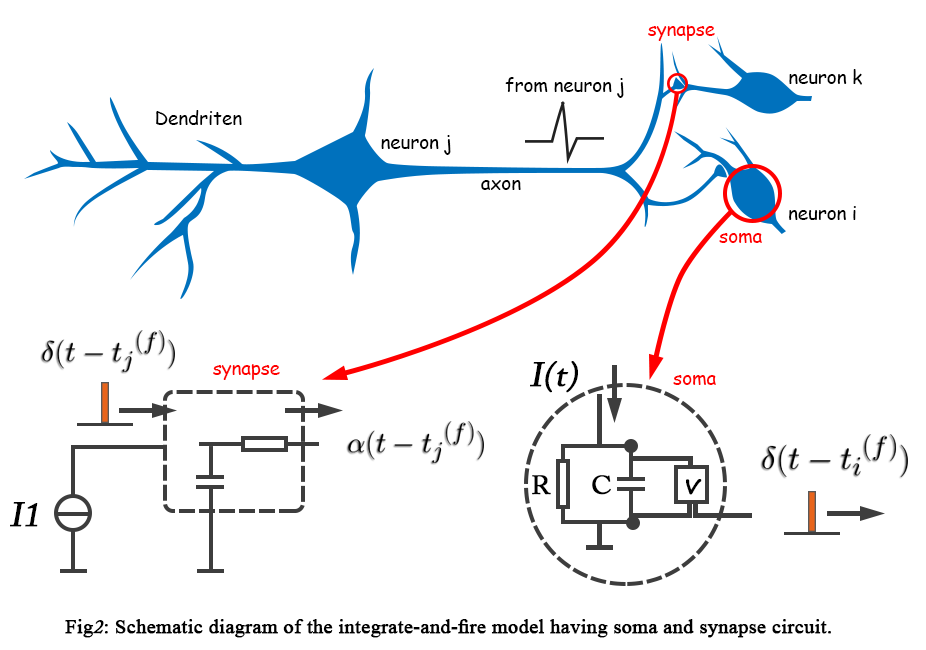
<style>
.page{position:relative;width:926px;height:650px;background:#ffffff}
.page>*{position:absolute;margin:0}
.t1{font:18.7px "ComicSansMS";color:#ff0000}
.t2{font:18.7px "ComicSansMS";color:#000000}
.t3{font:33.3px "ACaslonPro-Regular";color:#000000;font-weight:bold;font-style:italic}
.t4{font:26.7px "ACaslonPro-Regular";color:#000000;font-weight:bold}
.t5{font:26.7px "SegoePrint";color:#000000;font-weight:bold}
.t6{font:20px "TimesNewRomanPSMT";color:#000000;font-weight:bold}
.t7{font:18.7px "ACaslonPro-Regular";color:#000000;font-weight:bold;font-style:italic}
</style>
<div class="page">
<p class="t1" style="left:648px;top:25px;width:67px;height:16px">synapse</p>
<p class="t2" style="left:505px;top:77px;width:119px;height:21px">from neuron j</p>
<p class="t2" style="left:789px;top:69px;width:73px;height:16px">neuron k</p>
<p class="t2" style="left:156px;top:110px;width:86px;height:15px">Dendriten</p>
<p class="t2" style="left:381px;top:135px;width:70px;height:20px">neuron j</p>
<p class="t2" style="left:481px;top:180px;width:40px;height:10px">axon</p>
<p class="t2" style="left:789px;top:206px;width:67px;height:14px">neuron i</p>
<p class="t1" style="left:719px;top:233px;width:43px;height:10px">soma</p>
<p class="t1" style="left:213px;top:364px;width:67px;height:16px">synapse</p>
<p class="t3" style="left:530px;top:361px;width:48px;height:32px">I(t)</p>
<p class="t1" style="left:673px;top:375px;width:43px;height:10px">soma</p>
<p class="t4" style="left:532px;top:475px;width:19px;height:20px">R</p>
<p class="t4" style="left:592px;top:475px;width:19px;height:20px">C</p>
<p class="t5" style="left:686px;top:479px;width:16px;height:16px">v</p>
<p class="t3" style="left:10px;top:502px;width:28px;height:25px">I1</p>
<p class="t6" style="left:65px;top:619px;width:766px;height:19px">Fig<span class="t7">2</span>: Schematic diagram of the integrate-and-fire model having soma and synapse circuit.</p>
</div>
